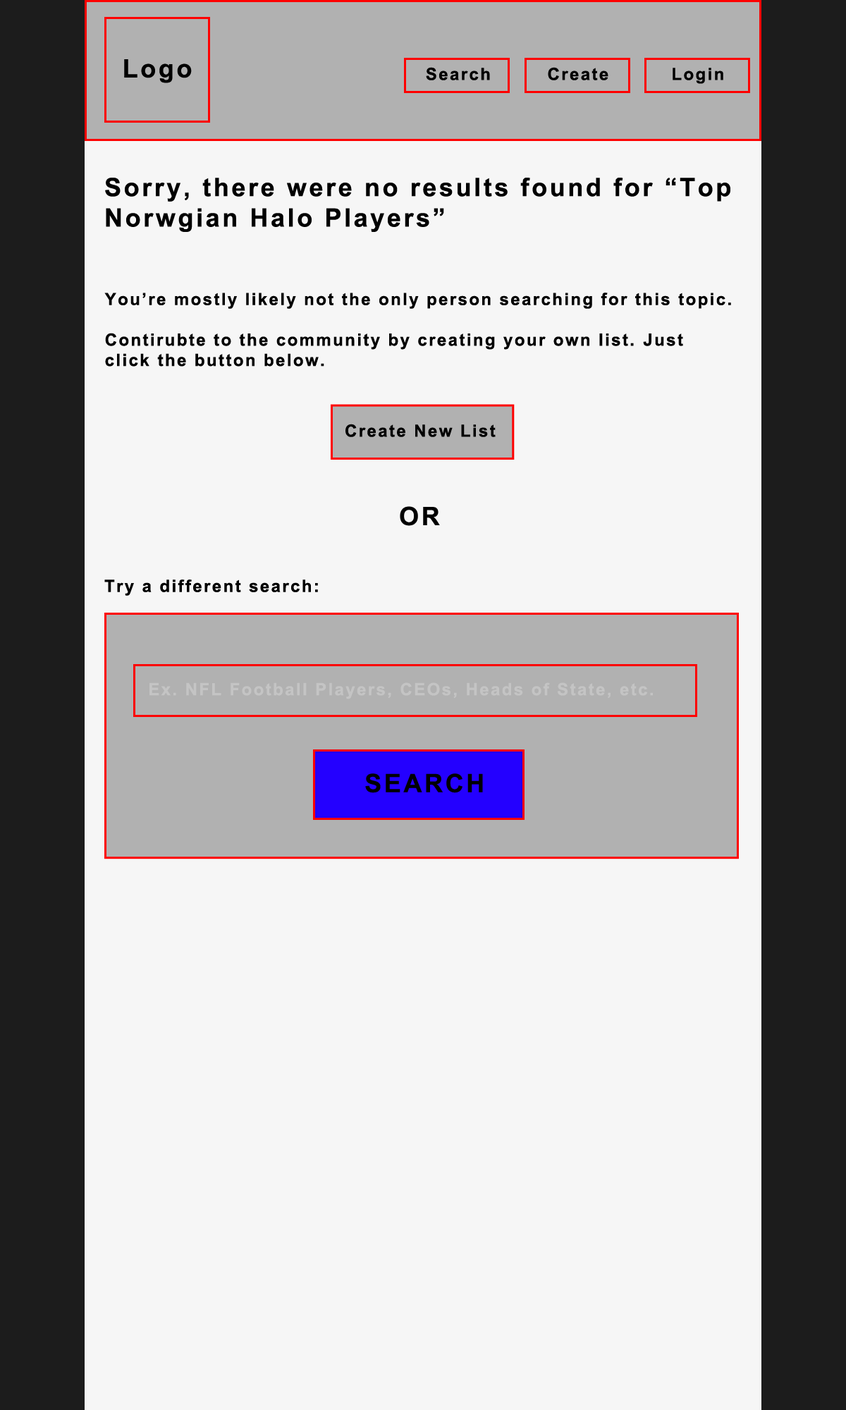
<style>
.page{position:relative;width:846px;height:1410px;background:#f6f6f6}
.page>*{position:absolute;margin:0}
.t1{font:25.4px "Arial-BoldMT";letter-spacing:0.1em;color:#000000}
.t2{font:16.9px "Arial-BoldMT";letter-spacing:0.1em;color:#000000}
.t3{font:16.9px "Arial-BoldMT";letter-spacing:0.1em;color:#c4c4c4}
</style>
<div class="page">
<p class="t1" style="left:124px;top:59px;width:68px;height:24px">Logo</p>
<p class="t2" style="left:426px;top:67px;width:64px;height:13px">Search</p>
<p class="t2" style="left:548px;top:67px;width:60px;height:13px">Create</p>
<p class="t2" style="left:672px;top:68px;width:51px;height:16px">Login</p>
<p class="t1" style="left:105px;top:178px;width:625px;height:54px">Sorry, there were no results found for “Top Norwgian Halo Players”</p>
<p class="t2" style="left:104px;top:293px;width:627px;height:74px">You’re mostly likely not the only person searching for this topic.<br><br>Contirubte to the community by creating your own list. Just click the button below.</p>
<p class="t2" style="left:345px;top:424px;width:151px;height:13px">Create New List</p>
<p class="t1" style="left:400px;top:506px;width:40px;height:20px">OR</p>
<p class="t2" style="left:104px;top:579px;width:214px;height:17px">Try a different search:</p>
<p class="t3" style="left:149px;top:682px;width:504px;height:17px">Ex. NFL Football Players, CEOs, Heads of State, etc.</p>
<p class="t1" style="left:365px;top:773px;width:118px;height:20px">SEARCH</p>
</div>
